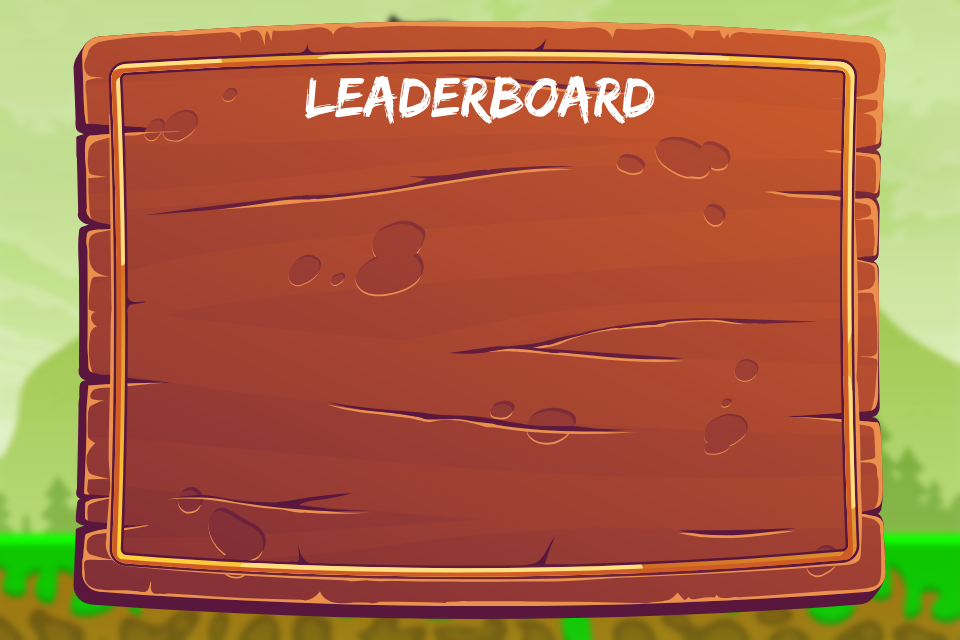
<style>
.page{position:relative;width:960px;height:640px}
.page>*{position:absolute;margin:0}
.t1{font:58.4px "Edo";color:#ffffff}
</style>
<div class="page">
<p class="t1" style="left:305px;top:75px;width:350px;height:50px">leaderboard</p>
</div>
